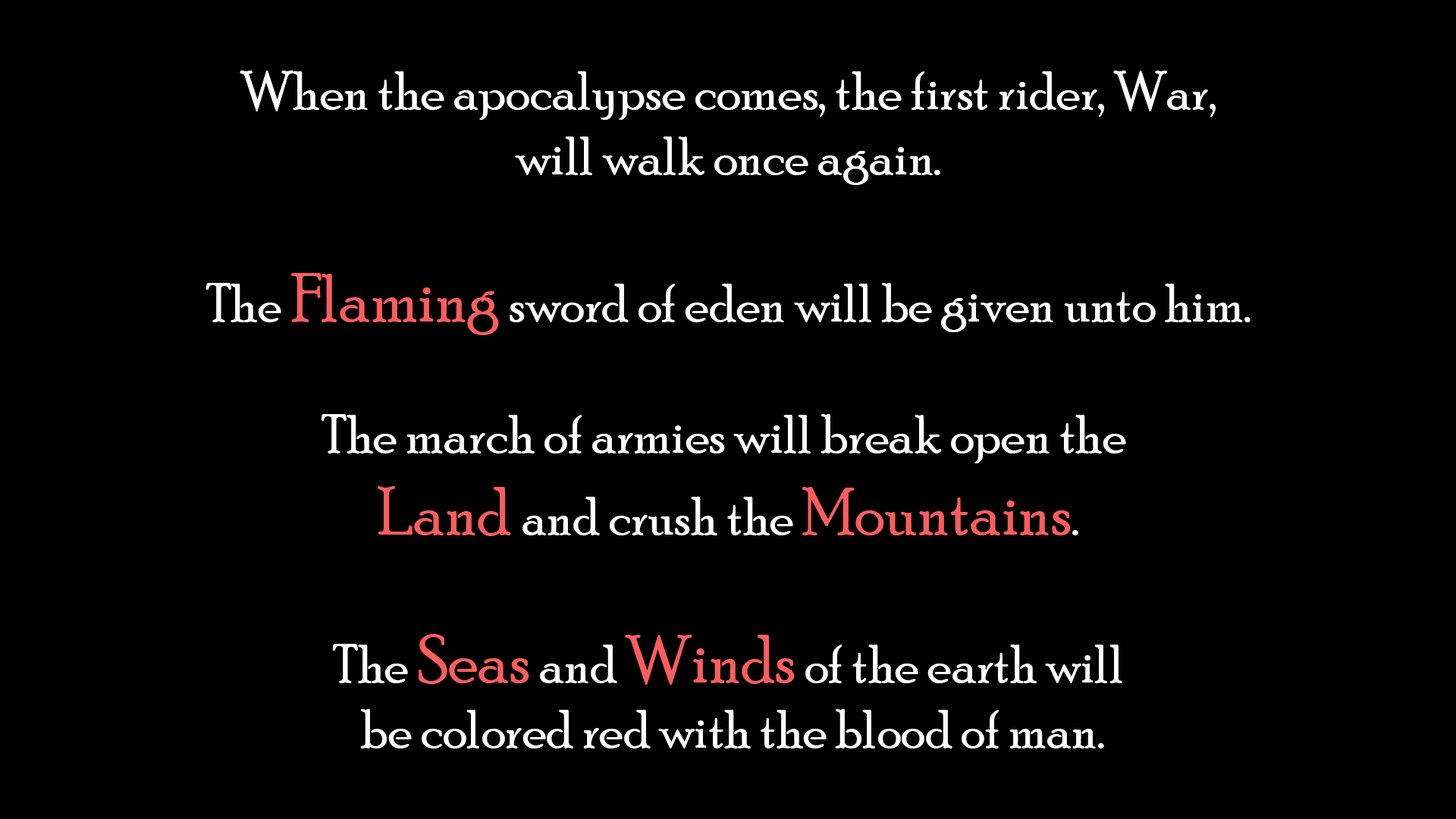
<style>
.page{position:relative;width:1456px;height:819px;background:#000000}
.page>*{position:absolute;margin:0}
.t1{font:54.6px "PoorRichard-Regular";color:#ffffff}
.t2{font:68.2px "PoorRichard-Regular";color:#fa5d5d}
</style>
<div class="page">
<p class="t1" style="left:206px;top:71px;width:1044px;height:677px;text-align:center">When the apocalypse comes, the first rider, War,<br>will walk once again.<br><br>The <span class="t2">Flaming</span> sword of eden will be given unto him.<br><br>The march of armies will break open the <br><span class="t2">Land </span>and crush the <span class="t2">Mountains</span>.<br><br>The <span class="t2">Seas </span>and <span class="t2">Winds</span> of the earth will<br> be colored red with the blood of man.</p>
</div>
